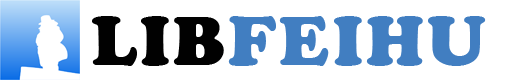
<style>
.page{position:relative;width:510px;height:80px;background:#ffffff}
.page>*{position:absolute;margin:0}
.t1{font:72px "CooperBlack";letter-spacing:0.05em;color:#417ec1}
.t2{font:72px "CooperBlack";letter-spacing:0.05em;color:#010101}
</style>
<div class="page">
<p class="t1" style="left:92px;top:16px;width:394px;height:50px"><span class="t2">LIB</span>FEIHU</p>
</div>
